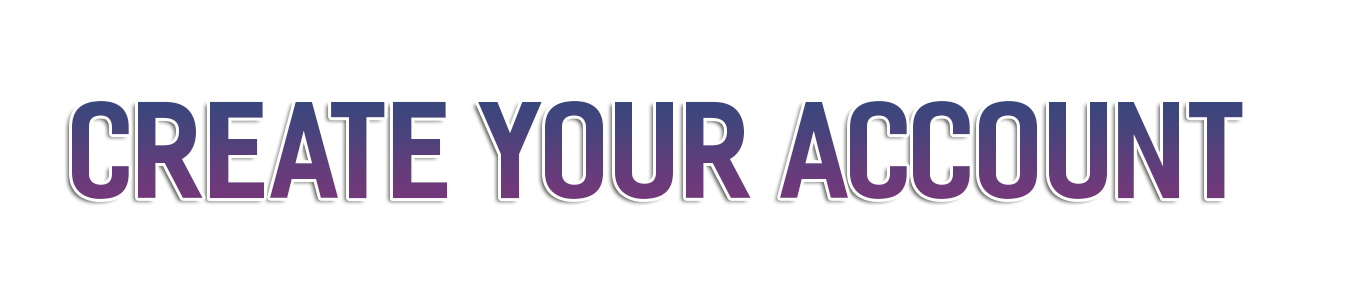
<style>
.page{position:relative;width:1352px;height:298px;background:#ffffff}
.page>*{position:absolute;margin:0}
.t1{font:128.1px "iCielFesterSemiCondensed-Bold";letter-spacing:0.005em}
</style>
<div class="page">
<p class="t1" style="left:72px;top:101px;width:1171px;height:98px">create your account</p>
</div>
